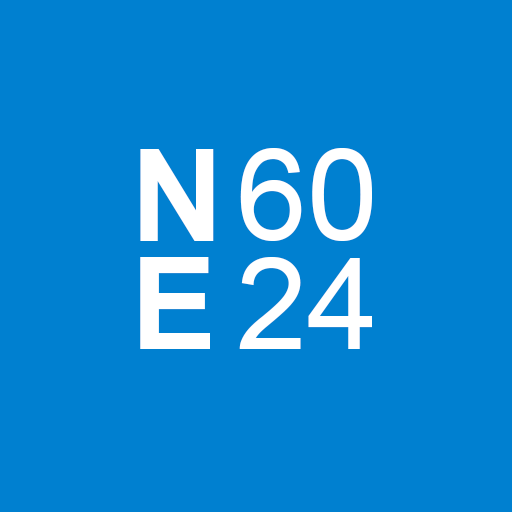
<style>
.page{position:relative;width:512px;height:512px;background:#0080d0}
.page>*{position:absolute;margin:0}
.t1{font:128px "Arial-BoldMT";color:#ffffff}
.t2{font:128px "ArialMT";color:#ffffff}
</style>
<div class="page">
<p class="t1" style="left:140px;top:149px;width:74px;height:92px">N</p>
<p class="t2" style="left:240px;top:148px;width:132px;height:93px">60</p>
<p class="t1" style="left:140px;top:257px;width:70px;height:92px">E</p>
<p class="t2" style="left:239px;top:257px;width:133px;height:92px">24</p>
</div>
